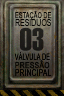
<style>
.page{position:relative;width:64px;height:96px}
.page>*{position:absolute;margin:0}
.t1{font:8.3px "ArialMT";color:#080705;text-transform:uppercase;scale:0.66 1}
.t2{font:9.2px "ArialMT";color:#080705;text-transform:uppercase;scale:0.72 1}
.t3{font:9.2px "ArialMT";color:#080705;font-weight:bold;scale:0.6 1}
.t4{font:8.3px "ArialMT";color:#080705;text-transform:uppercase;font-weight:bold;scale:0.8 1}
.t5{font:9.5px "ArialMT";color:#080705;font-weight:bold;scale:0.7 1}
</style>
<div class="page">
<p class="t1" style="left:15px;top:10px;width:37px;height:10px">Estação DE</p>
<p class="t2" style="left:15px;top:19px;width:37px;height:7px">Residuos</p>
<p class="t3" style="left:14px;top:51px;width:36px;height:9px">VÁLVULA DE</p>
<p class="t4" style="left:15px;top:60px;width:35px;height:9px">Pressão</p>
<p class="t5" style="left:15px;top:69px;width:37px;height:7px">PRINCIPAL</p>
</div>
